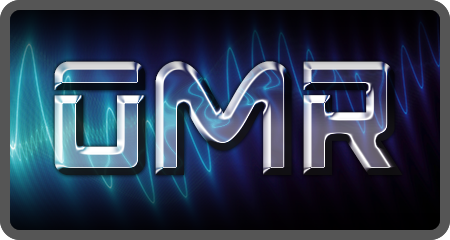
<style>
.page{position:relative;width:450px;height:240px}
.page>*{position:absolute;margin:0}
.t1{font:180px "ARDESTINE"}
</style>
<div class="page">
<p class="t1" style="left:54px;top:61px;width:349px;height:114px">OMR</p>
</div>
